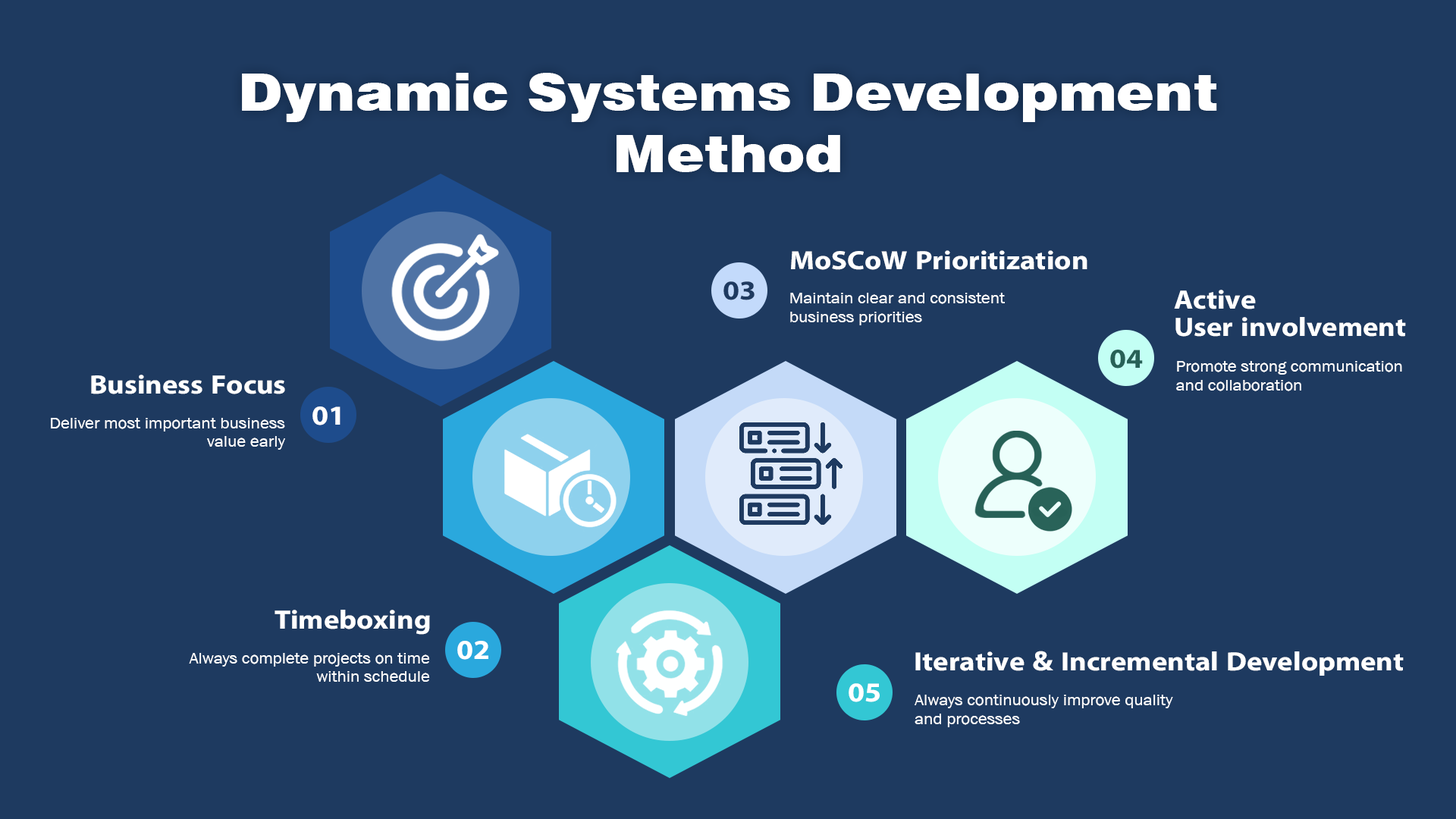
<style>
.page{position:relative;width:1456px;height:819px;background:#1e3a60}
.page>*{position:absolute;margin:0}
.t1{font:51.7px "Swiss721BT-Black";color:#ffffff;scale:1.1 1}
.t2{font:26.6px "iKampuchea001_O'Chrov";color:#ffffff;scale:1.11 1}
.t3{font:27.3px "iKampuchea001_O'Chrov";color:#1e3a60;scale:1.11 1}
.t4{font:15.6px "AA-Khmer-AngDaunPov";color:#ffffff;scale:1.11 1}
.t5{font:26.7px/27.3px "iKampuchea001_O'Chrov";color:#ffffff;scale:1.1 1}
.t6{font:27.5px "iKampuchea001_O'Chrov";color:#276157;scale:1.1 1}
.t7{font:15.7px "AA-Khmer-AngDaunPov";color:#ffffff;scale:1.1 1}
.t8{font:26.7px "iKampuchea001_O'Chrov";color:#ffffff;scale:1.1 1}
.t9{font:27.4px "iKampuchea001_O'Chrov";color:#ffffff;scale:1.1 1}
.t10{font:26.6px "iKampuchea001_O'Chrov";color:#ffffff;scale:1.1 1}
.t11{font:15.6px "AA-Khmer-AngDaunPov";color:#ffffff;scale:1.1 1}
</style>
<div class="page">
<p class="t1" style="left:242px;top:73px;width:975px;height:99px;text-align:center">Dynamic Systems Development<br>Method</p>
<p class="t2" style="left:791px;top:250px;width:296px;height:20px">MoSCoW Prioritization</p>
<p class="t3" style="left:723px;top:281px;width:32px;height:19px">03</p>
<p class="t4" style="left:790px;top:293px;width:215px;height:32px">Maintain clear and consistent <br>business priorities</p>
<p class="t5" style="left:1174px;top:290px;width:232px;height:47px">Active<br>User involvement</p>
<p class="t6" style="left:1110px;top:350px;width:33px;height:19px">04</p>
<p class="t7" style="left:1176px;top:361px;width:226px;height:30px">Promote strong communication <br>and collaboration</p>
<p class="t8" style="left:91px;top:375px;width:194px;height:19px">Business Focus</p>
<p class="t9" style="left:312px;top:406px;width:28px;height:19px">01</p>
<p class="t7" style="left:51px;top:418px;width:234px;height:32px;text-align:right">Deliver most important business<br>value early</p>
<p class="t8" style="left:275px;top:610px;width:155px;height:25px">Timeboxing</p>
<p class="t9" style="left:457px;top:641px;width:31px;height:19px">02</p>
<p class="t7" style="left:189px;top:653px;width:241px;height:29px;text-align:right">Always complete projects on time<br>within schedule</p>
<p class="t10" style="left:915px;top:651px;width:489px;height:25px">Iterative &amp; Incremental Development</p>
<p class="t9" style="left:849px;top:683px;width:31px;height:19px">05</p>
<p class="t11" style="left:915px;top:695px;width:258px;height:32px">Always continuously improve quality <br>and processes</p>
</div>
